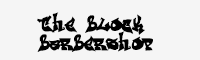
<style>
.page{position:relative;width:200px;height:60px;background:#f5f5f5}
.page>*{position:absolute;margin:0}
.t1{font:17.8px/19.1px "ReskaGraf";letter-spacing:0.05em;color:#000000;text-transform:uppercase}
</style>
<div class="page">
<p class="t1" style="left:37px;top:12px;width:116px;height:40px">the block<br>barbershop</p>
</div>
